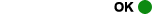
<style>
.page{position:relative;width:154px;height:15px;background:#ffffff}
.page>*{position:absolute;margin:0}
.t1{font:13px "Arial-BoldMT";color:#000000}
</style>
<div class="page">
<p class="t1" style="left:114px;top:2px;width:20px;height:10px">OK</p>
</div>
